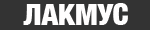
<style>
.page{position:relative;width:150px;height:30px;background:#333333}
.page>*{position:absolute;margin:0}
.t1{font:30px "HelveticaNeue-CondensedBlack";color:#fffefe}
</style>
<div class="page">
<p class="t1" style="left:23px;top:3px;width:105px;height:22px">ЛАКМУС</p>
</div>
